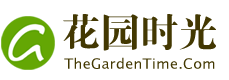
<style>
.page{position:relative;width:229px;height:80px;background:#ffffff}
.page>*{position:absolute;margin:0}
.t1{font:39px "FZDBSJW--GB1-0";color:#433802}
.t2{font:14.3px "LucidaSansUnicode";letter-spacing:0.02em;color:#433802}
</style>
<div class="page">
<p class="t1" style="left:63px;top:14px;width:153px;height:37px">花园时光</p>
<p class="t2" style="left:64px;top:57px;width:151px;height:12px">TheGardenTime.Com</p>
</div>
